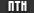
<style>
.page{position:relative;width:34px;height:13px;background:#333333}
.page>*{position:absolute;margin:0}
.t1{font:13.9px "NK_04";color:#ffffff}
</style>
<div class="page">
<p class="t1" style="left:8px;top:1px;width:19px;height:10px">ПТН</p>
</div>
